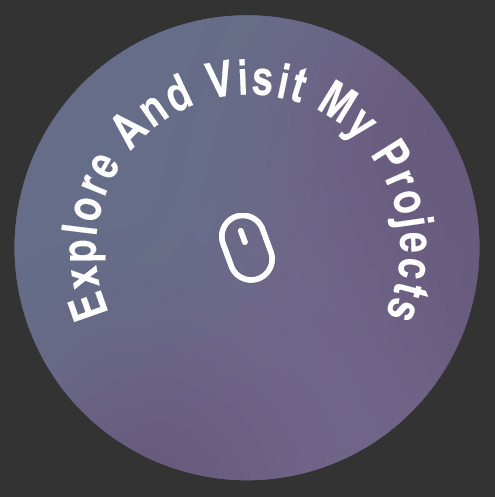
<style>
.page{position:relative;width:495px;height:497px;background:#333333}
.page>*{position:absolute;margin:0}
.t1{font:49.7px "Arial-BoldMT";letter-spacing:0.06em;color:#ffffff;scale:0.78 1}
</style>
<div class="page">
<p class="t1" style="left:61px;top:59px;width:374px;height:263px;text-align:center">Explore And Visit My Projects</p>
</div>
